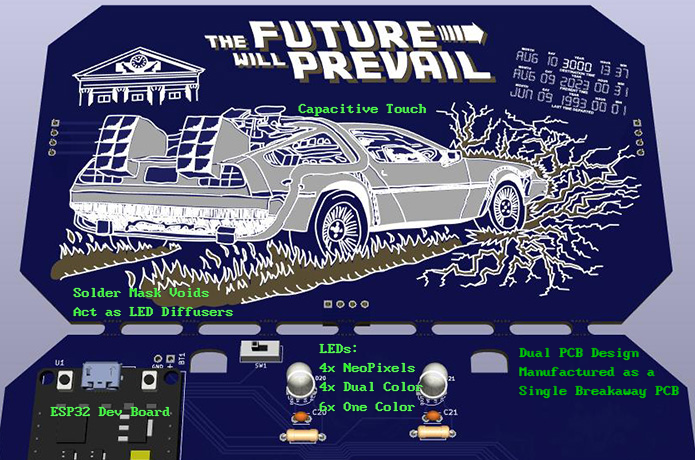
<style>
.page{position:relative;width:695px;height:460px}
.page>*{position:absolute;margin:0}
.t1{font:16px "Px437_ATT_PC6300";color:#57f557}
.t2{font:16px "Px437_ATT_PC6300";color:#55f555}
.t3{font:16px "Px437_ATT_PC6300";color:#54f554}
.t4{font:16px "Px437_ATT_PC6300";color:#00c400}
</style>
<div class="page">
<p class="t1" style="left:298px;top:103px;width:128px;height:14px">Capacitive Touch</p>
<p class="t2" style="left:73px;top:287px;width:160px;height:30px">Solder Mask Voids<br>Act as LED Diffusers</p>
<p class="t3" style="left:319px;top:343px;width:104px;height:69px">LEDs:<br>4x NeoPixels<br>4x Dual Color<br>6x One Color</p>
<p class="t4" style="left:519px;top:347px;width:160px;height:52px">Dual PCB Design<br>Manufactured as a<br>Single Breakaway PCB</p>
<p class="t3" style="left:50px;top:406px;width:120px;height:11px">ESP32 Dev Board</p>
</div>
